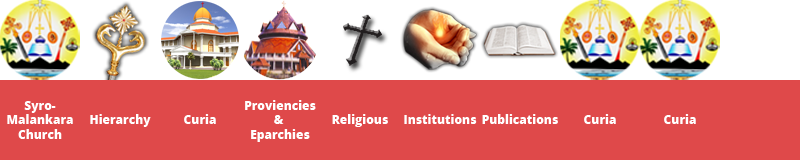
<style>
.page{position:relative;width:800px;height:160px;background:#df494a}
.page>*{position:absolute;margin:0}
.t1{font:12px "OpenSans-Extrabold";color:#ffffff}
</style>
<div class="page">
<p class="t1" style="left:7px;top:101px;width:66px;height:38px;text-align:center">Syro-<br>Malankara<br>Church</p>
<p class="t1" style="left:245px;top:100px;width:71px;height:42px;text-align:center">Proviencies<br>&amp; <br>Eparchies</p>
<p class="t1" style="left:90px;top:114px;width:61px;height:13px">Hierarchy</p>
<p class="t1" style="left:184px;top:114px;width:32px;height:10px">Curia</p>
<p class="t1" style="left:332px;top:114px;width:56px;height:13px">Religious</p>
<p class="t1" style="left:404px;top:114px;width:73px;height:10px">Institutions</p>
<p class="t1" style="left:482px;top:114px;width:76px;height:10px">Publications</p>
<p class="t1" style="left:584px;top:114px;width:32px;height:10px">Curia</p>
<p class="t1" style="left:664px;top:114px;width:32px;height:10px">Curia</p>
</div>
